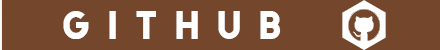
<style>
.page{position:relative;width:440px;height:50px;background:#74472d}
.page>*{position:absolute;margin:0}
.t1{font:37.5px "TheNextFont";letter-spacing:0.48em;color:#ffffff}
</style>
<div class="page">
<p class="t1" style="left:63px;top:11px;width:218px;height:28px">GITHUB</p>
</div>
